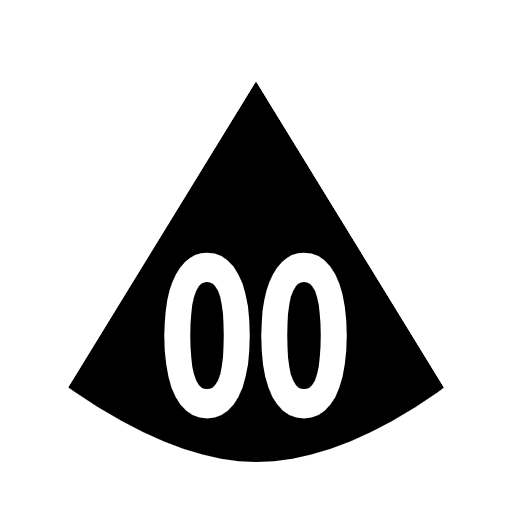
<style>
.page{position:relative;width:512px;height:512px;background:#ffffff}
.page>*{position:absolute;margin:0}
.t1{font:229.3px "Ubuntu-Bold";color:#ffffff;scale:0.74 1}
</style>
<div class="page">
<p class="t1" style="left:164px;top:252px;width:183px;height:167px">00</p>
</div>
